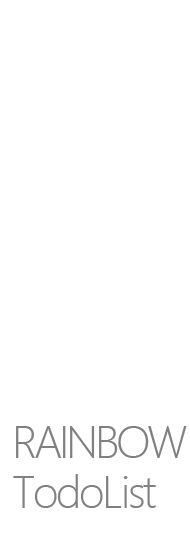
<style>
.page{position:relative;width:190px;height:550px;background:#ffffff}
.page>*{position:absolute;margin:0}
.t1{font:41.7px/50px "MicrosoftYaHeiUILight";letter-spacing:-0.05em;color:#808080}
.t2{font:41.7px/50px "MicrosoftYaHeiUILight";letter-spacing:-0.075em;color:#808080}
</style>
<div class="page">
<p class="t1" style="left:13px;top:426px;width:174px;height:82px"><span class="t2">RAINBOW<br></span>TodoList</p>
</div>
